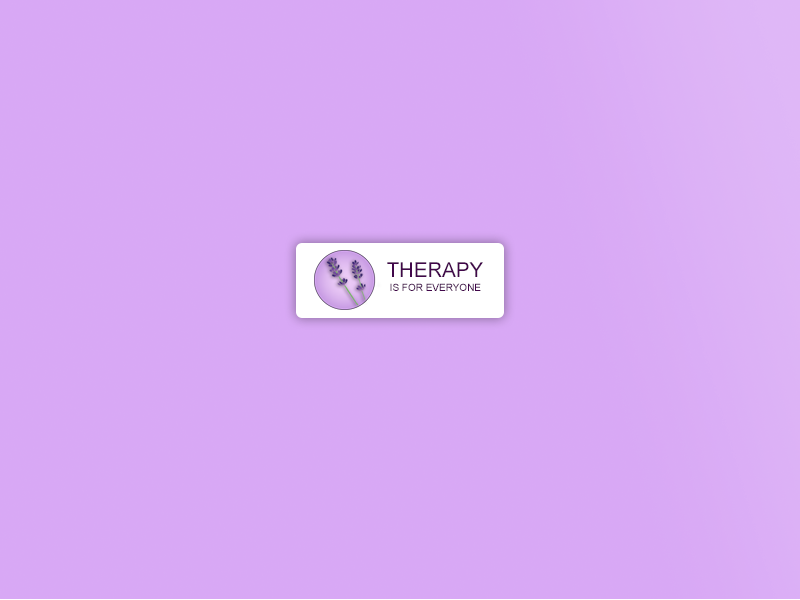
<style>
.page{position:relative;width:800px;height:600px;background:#d8a8f5}
.page>*{position:absolute;margin:0}
.t1{font:20.4px "ArialMT";color:#41074a}
.t2{font:10px "ArialMT";color:#41074a}
</style>
<div class="page">
<p class="t1" style="left:387px;top:262px;width:96px;height:15px">THERAPY</p>
<p class="t2" style="left:390px;top:283px;width:91px;height:8px">IS FOR EVERYONE</p>
</div>
